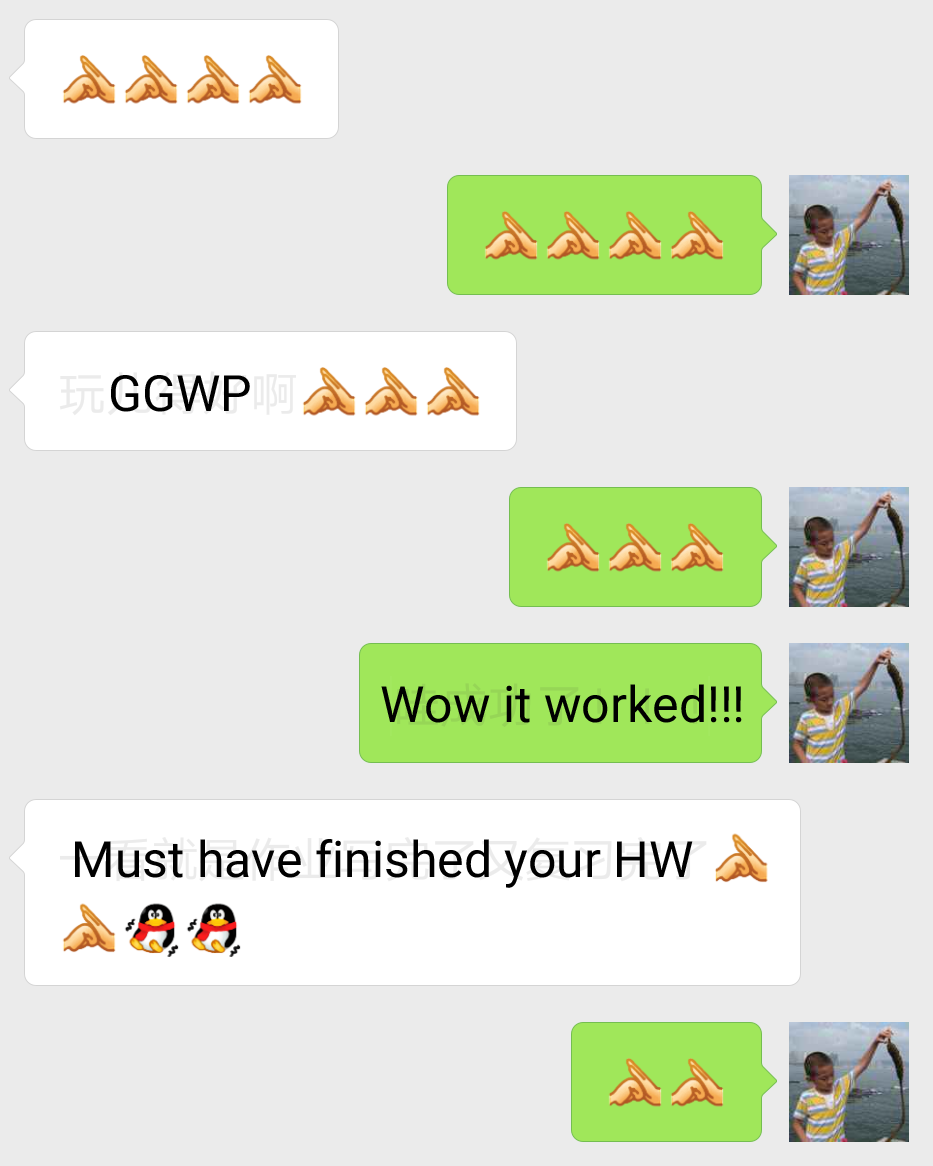
<style>
.page{position:relative;width:933px;height:1166px;background:#ebebeb}
.page>*{position:absolute;margin:0}
.t1{font:50px "Roboto-Regular";color:#000000}
</style>
<div class="page">
<p class="t1" style="left:111px;top:375px;width:139px;height:37px">GGWP</p>
<p class="t1" style="left:381px;top:684px;width:361px;height:39px">Wow it worked!!!</p>
<p class="t1" style="left:75px;top:839px;width:618px;height:49px">Must have finished your HW</p>
</div>
